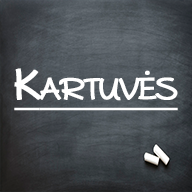
<style>
.page{position:relative;width:192px;height:192px}
.page>*{position:absolute;margin:0}
.t1{font:43px "TypoComica";letter-spacing:-0.05em;color:#ffffff;font-variant:small-caps;font-weight:bold;text-decoration:underline}
</style>
<div class="page">
<p class="t1" style="left:14px;top:68px;width:164px;height:43px">Kartuvės</p>
</div>
